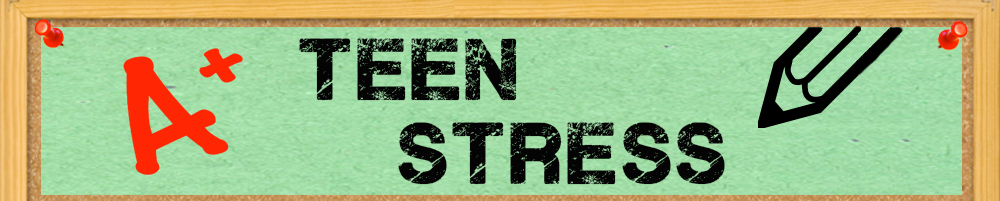
<style>
.page{position:relative;width:1000px;height:201px}
.page>*{position:absolute;margin:0}
.t1{font:70px "PlaneCrash";color:#040404}
.t2{font:70px "PlaneCrash";color:#f5ecec}
</style>
<div class="page">
<p class="t1" style="left:299px;top:38px;width:426px;height:147px;text-align:center"><span class="t2">  </span>teen <br>          stress</p>
</div>
